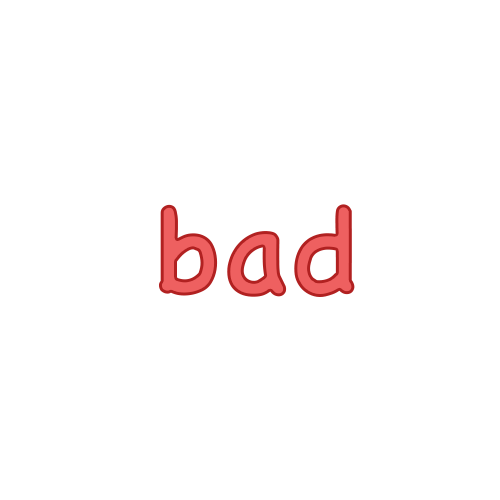
<style>
.page{position:relative;width:500px;height:500px;background:#ffffff}
.page>*{position:absolute;margin:0}
.t1{font:120px "Chalkboard-Bold";color:#ee6060}
</style>
<div class="page">
<p class="t1" style="left:159px;top:204px;width:196px;height:93px">bad</p>
</div>
